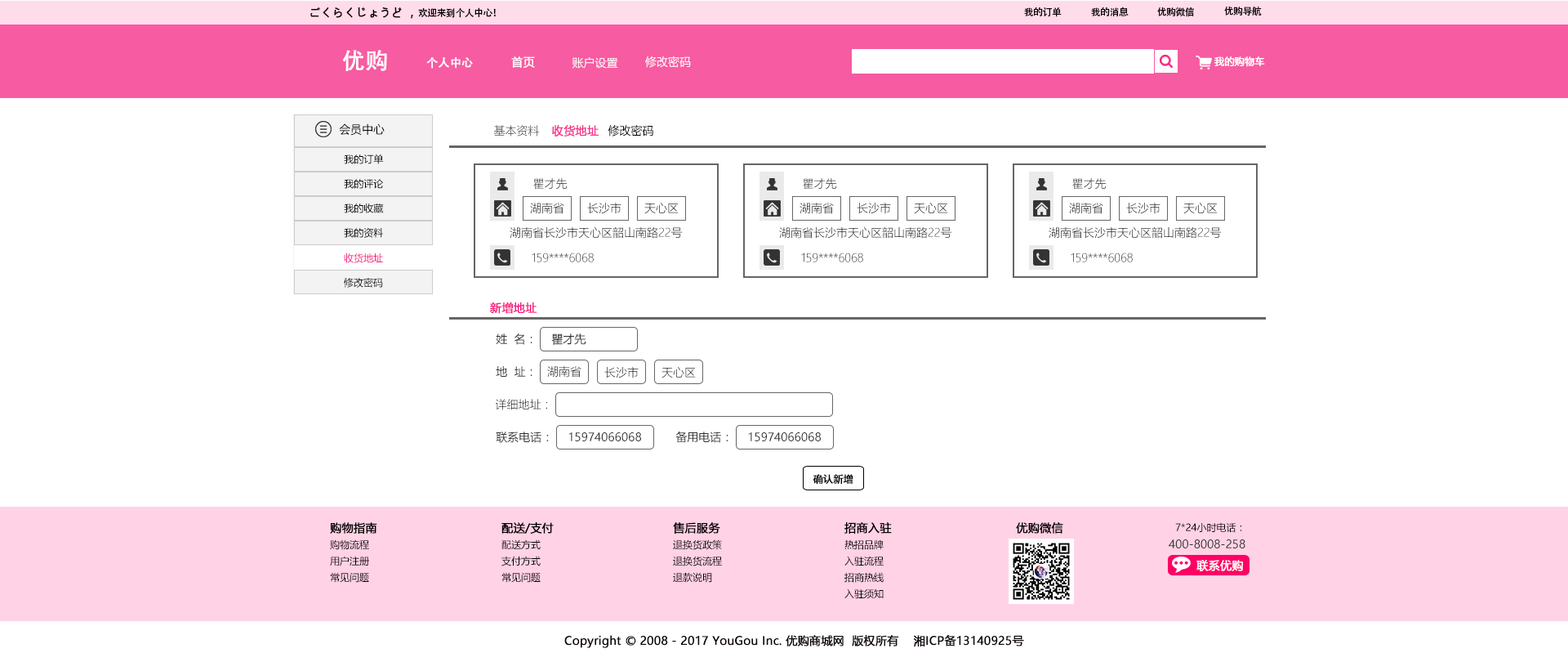
<style>
.page{position:relative;width:1568px;height:662px;background:#ffffff}
.page>*{position:absolute;margin:0}
.t1{font:11.4px "MicrosoftYaHei";color:#040000;font-weight:bold}
.t2{font:9.5px "AdobeHeitiStd-Regular";letter-spacing:-0.025em;color:#000000}
.t3{font:22.9px "AdobeHeitiStd-Regular";color:#ffffff;font-weight:bold}
.t4{font:11.4px "AdobeHeitiStd-Regular";color:#ffffff;font-weight:bold}
.t5{font:11.4px "MicrosoftYaHei";color:#ffffff;font-weight:bold}
.t6{font:11.4px "MicrosoftYaHei";color:#ffffff}
.t7{font:9.8px "MicrosoftYaHei";color:#ffffff;font-weight:bold}
.t8{font:11.4px "MicrosoftYaHei";color:#040000}
.t9{font:11.4px "MicrosoftYaHeiLight";color:#333333}
.t10{font:11.4px "MicrosoftYaHei";color:#f7328b;font-weight:bold}
.t11{font:11.4px "MicrosoftYaHei";color:#000000}
.t12{font:9.8px "MicrosoftYaHei";color:#040000}
.t13{font:9.8px "MicrosoftYaHei";color:#000000}
.t14{font:11.4px "MicrosoftYaHeiLight"}
.t15{font:9.8px "MicrosoftYaHei";color:#060001}
.t16{font:11.4px "MicrosoftYaHeiLight";color:#0e050a}
.t17{font:9.8px "MicrosoftYaHei";color:#f72784}
.t18{font:11.4px "MicrosoftYaHei";color:#f7197d;font-weight:bold}
.t19{font:11.4px "MicrosoftYaHei";color:#333333}
.t20{font:9.8px "MicrosoftYaHei";color:#000000;font-weight:bold}
.t21{font:11.4px "MicrosoftYaHei";color:#323333}
.t22{font:11.4px "MicrosoftYaHei";color:#0e050a;font-weight:bold}
</style>
<div class="page">
<p class="t1" style="left:310px;top:7px;width:186px;height:12px">ごくらくじょうど ，<span class="t2">欢迎来到个人中心！</span></p>
<p class="t2" style="left:1024px;top:7px;width:38px;height:10px">我的订单</p>
<p class="t2" style="left:1091px;top:7px;width:38px;height:9px">我的消息</p>
<p class="t2" style="left:1157px;top:7px;width:37px;height:10px">优购微信</p>
<p class="t2" style="left:1224px;top:7px;width:38px;height:9px">优购导航</p>
<p class="t3" style="left:342px;top:50px;width:45px;height:21px">优购</p>
<p class="t4" style="left:426px;top:57px;width:47px;height:12px">个人中心</p>
<p class="t5" style="left:511px;top:56px;width:24px;height:12px">首页</p>
<p class="t6" style="left:572px;top:57px;width:46px;height:12px">账户设置</p>
<p class="t6" style="left:645px;top:56px;width:46px;height:12px">修改密码</p>
<p class="t7" style="left:1214px;top:56px;width:51px;height:11px">我的购物车</p>
<p class="t8" style="left:339px;top:123px;width:46px;height:13px">会员中心</p>
<p class="t9" style="left:494px;top:125px;width:45px;height:11px">基本资料</p>
<p class="t10" style="left:552px;top:125px;width:47px;height:11px">收货地址</p>
<p class="t11" style="left:608px;top:125px;width:45px;height:11px">修改密码</p>
<p class="t12" style="left:344px;top:154px;width:40px;height:10px">我的订单</p>
<p class="t13" style="left:344px;top:179px;width:40px;height:10px">我的评论</p>
<p class="t14" style="left:533px;top:178px;width:35px;height:11px">瞿才先</p>
<p class="t14" style="left:803px;top:178px;width:34px;height:11px">瞿才先</p>
<p class="t14" style="left:1072px;top:178px;width:35px;height:11px">瞿才先</p>
<p class="t15" style="left:344px;top:203px;width:40px;height:10px">我的收藏</p>
<p class="t16" style="left:530px;top:203px;width:34px;height:11px">湖南省</p>
<p class="t14" style="left:587px;top:203px;width:34px;height:11px">长沙市</p>
<p class="t14" style="left:644px;top:203px;width:35px;height:11px">天心区</p>
<p class="t16" style="left:800px;top:203px;width:34px;height:11px">湖南省</p>
<p class="t14" style="left:857px;top:203px;width:34px;height:11px">长沙市</p>
<p class="t14" style="left:914px;top:203px;width:34px;height:11px">天心区</p>
<p class="t16" style="left:1069px;top:203px;width:34px;height:11px">湖南省</p>
<p class="t14" style="left:1126px;top:203px;width:34px;height:11px">长沙市</p>
<p class="t14" style="left:1183px;top:203px;width:35px;height:11px">天心区</p>
<p class="t15" style="left:344px;top:227px;width:39px;height:11px">我的资料</p>
<p class="t16" style="left:510px;top:227px;width:173px;height:11px">湖南省长沙市天心区韶山南路22号</p>
<p class="t16" style="left:779px;top:227px;width:173px;height:11px">湖南省长沙市天心区韶山南路22号</p>
<p class="t16" style="left:1049px;top:227px;width:173px;height:11px">湖南省长沙市天心区韶山南路22号</p>
<p class="t17" style="left:344px;top:253px;width:39px;height:10px">收货地址</p>
<p class="t14" style="left:532px;top:252px;width:62px;height:10px">159****6068</p>
<p class="t14" style="left:801px;top:252px;width:62px;height:10px">159****6068</p>
<p class="t14" style="left:1071px;top:252px;width:62px;height:10px">159****6068</p>
<p class="t15" style="left:344px;top:278px;width:39px;height:9px">修改密码</p>
<p class="t18" style="left:490px;top:301px;width:47px;height:13px">新增地址</p>
<p class="t19" style="left:496px;top:333px;width:36px;height:12px">姓  名：</p>
<p class="t19" style="left:551px;top:333px;width:35px;height:12px">瞿才先</p>
<p class="t19" style="left:496px;top:366px;width:36px;height:10px">地  址：</p>
<p class="t16" style="left:547px;top:366px;width:34px;height:11px">湖南省</p>
<p class="t14" style="left:604px;top:367px;width:35px;height:11px">长沙市</p>
<p class="t14" style="left:662px;top:367px;width:34px;height:11px">天心区</p>
<p class="t14" style="left:496px;top:399px;width:51px;height:11px">详细地址：</p>
<p class="t19" style="left:496px;top:431px;width:53px;height:12px">联系电话：</p>
<p class="t19" style="left:568px;top:432px;width:73px;height:9px">15974066068</p>
<p class="t19" style="left:675px;top:430px;width:53px;height:13px">备用电话：</p>
<p class="t19" style="left:748px;top:432px;width:73px;height:9px">15974066068</p>
<p class="t20" style="left:813px;top:474px;width:40px;height:10px">确认新增</p>
<p class="t1" style="left:330px;top:522px;width:47px;height:11px">购物指南</p>
<p class="t1" style="left:501px;top:522px;width:53px;height:11px">配送/支付</p>
<p class="t1" style="left:673px;top:522px;width:47px;height:11px">售后服务</p>
<p class="t1" style="left:844px;top:522px;width:48px;height:11px">招商入驻</p>
<p class="t1" style="left:1016px;top:522px;width:47px;height:11px">优购微信</p>
<p class="t12" style="left:1175px;top:522px;width:67px;height:10px">7*24小时电话：</p>
<p class="t12" style="left:330px;top:539px;width:39px;height:11px">购物流程</p>
<p class="t12" style="left:501px;top:539px;width:40px;height:11px">配送方式</p>
<p class="t12" style="left:673px;top:539px;width:49px;height:11px">退换货政策</p>
<p class="t12" style="left:844px;top:539px;width:40px;height:11px">热招品牌</p>
<p class="t21" style="left:1169px;top:539px;width:76px;height:9px">400-8008-258</p>
<p class="t12" style="left:330px;top:555px;width:39px;height:11px">用户注册</p>
<p class="t12" style="left:501px;top:555px;width:40px;height:11px">支付方式</p>
<p class="t12" style="left:673px;top:555px;width:49px;height:11px">退换货流程</p>
<p class="t12" style="left:844px;top:555px;width:40px;height:11px">入驻流程</p>
<p class="t5" style="left:1196px;top:559px;width:47px;height:12px">联系优购</p>
<p class="t12" style="left:330px;top:572px;width:39px;height:10px">常见问题</p>
<p class="t12" style="left:501px;top:572px;width:40px;height:10px">常见问题</p>
<p class="t12" style="left:673px;top:572px;width:39px;height:10px">退款说明</p>
<p class="t12" style="left:844px;top:572px;width:40px;height:10px">招商热线</p>
<p class="t12" style="left:844px;top:588px;width:40px;height:11px">入驻须知</p>
<p class="t22" style="left:564px;top:634px;width:460px;height:14px">Copyright © 2008 - 2017 YouGou Inc. 优购商城网  版权所有    湘ICP备13140925号</p>
</div>
